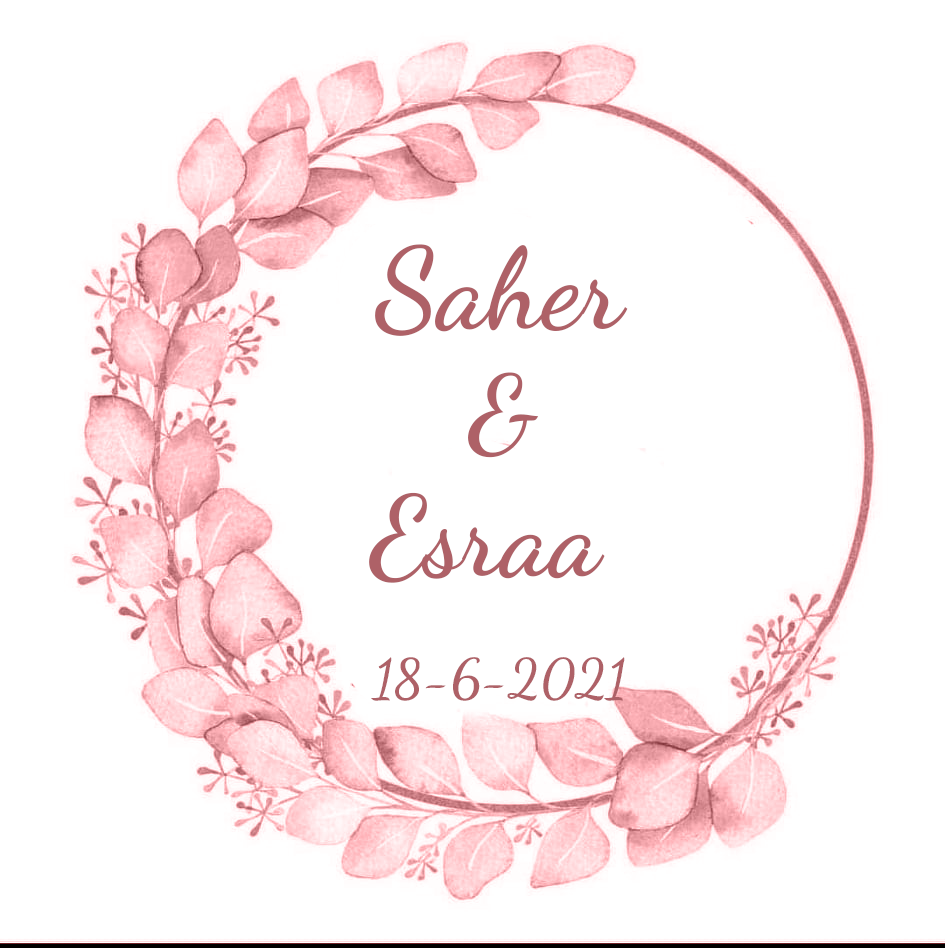
<style>
.page{position:relative;width:945px;height:948px;background:#ffffff}
.page>*{position:absolute;margin:0}
.t1{font:113.3px "DancingScript-SemiBold";color:#ae6167}
.t2{font:105px "DancingScript-SemiBold";color:#ae6167}
.t3{font:111.4px "DancingScript-SemiBold";color:#ae6167}
.t4{font:54px "DancingScript-SemiBold";color:#ae6167}
</style>
<div class="page">
<p class="t1" style="left:375px;top:244px;width:253px;height:92px">Saher</p>
<p class="t2" style="left:468px;top:372px;width:71px;height:86px">&amp;</p>
<p class="t3" style="left:369px;top:492px;width:236px;height:91px">Esraa</p>
<p class="t4" style="left:371px;top:657px;width:254px;height:44px">18-6-2021</p>
</div>
